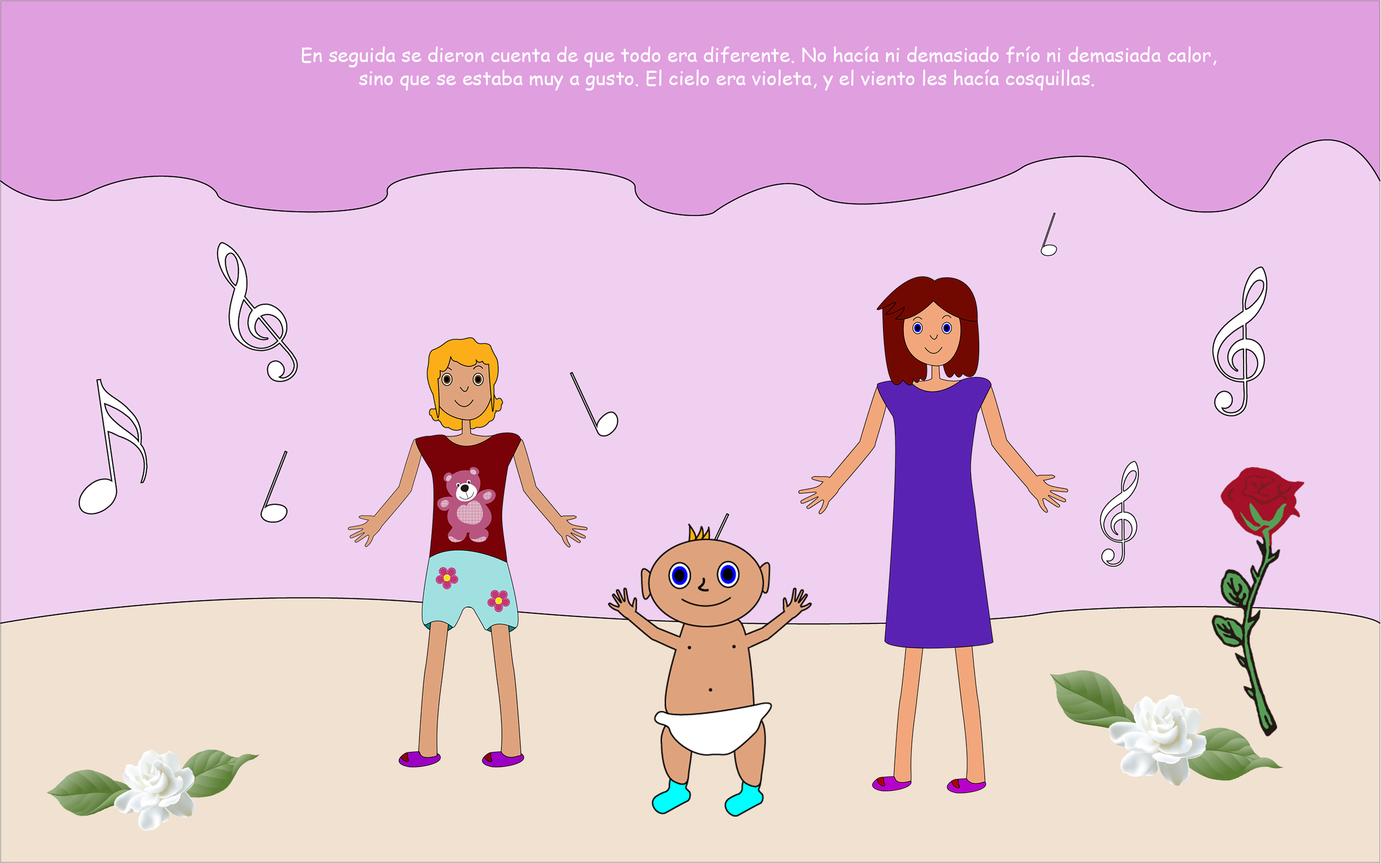
<style>
.page{position:relative;width:1381px;height:863px;background:#efd0f0}
.page>*{position:absolute;margin:0}
.t1{font:19.4px "ComicSansMS";color:#ffffff}
</style>
<div class="page">
<p class="t1" style="left:302px;top:46px;width:915px;height:45px">En seguida se dieron cuenta de que todo era diferente. No hacía ni demasiado frío ni demasiada calor, <br>   sino que se estaba muy a gusto. El cielo era violeta, y el viento les hacía cosquillas.</p>
</div>
